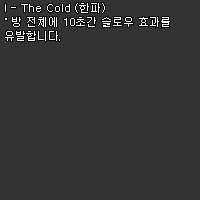
<style>
.page{position:relative;width:200px;height:200px;background:#333333}
.page>*{position:absolute;margin:0}
.t1{font:11px/14px "Dotum";color:#ffffff}
</style>
<div class="page">
<p class="t1" style="left:5px;top:3px;width:165px;height:38px">I - The Cold (한파)<br>˚ 방 전체에 10초간 슬로우 효과를<br>유발합니다.</p>
</div>
